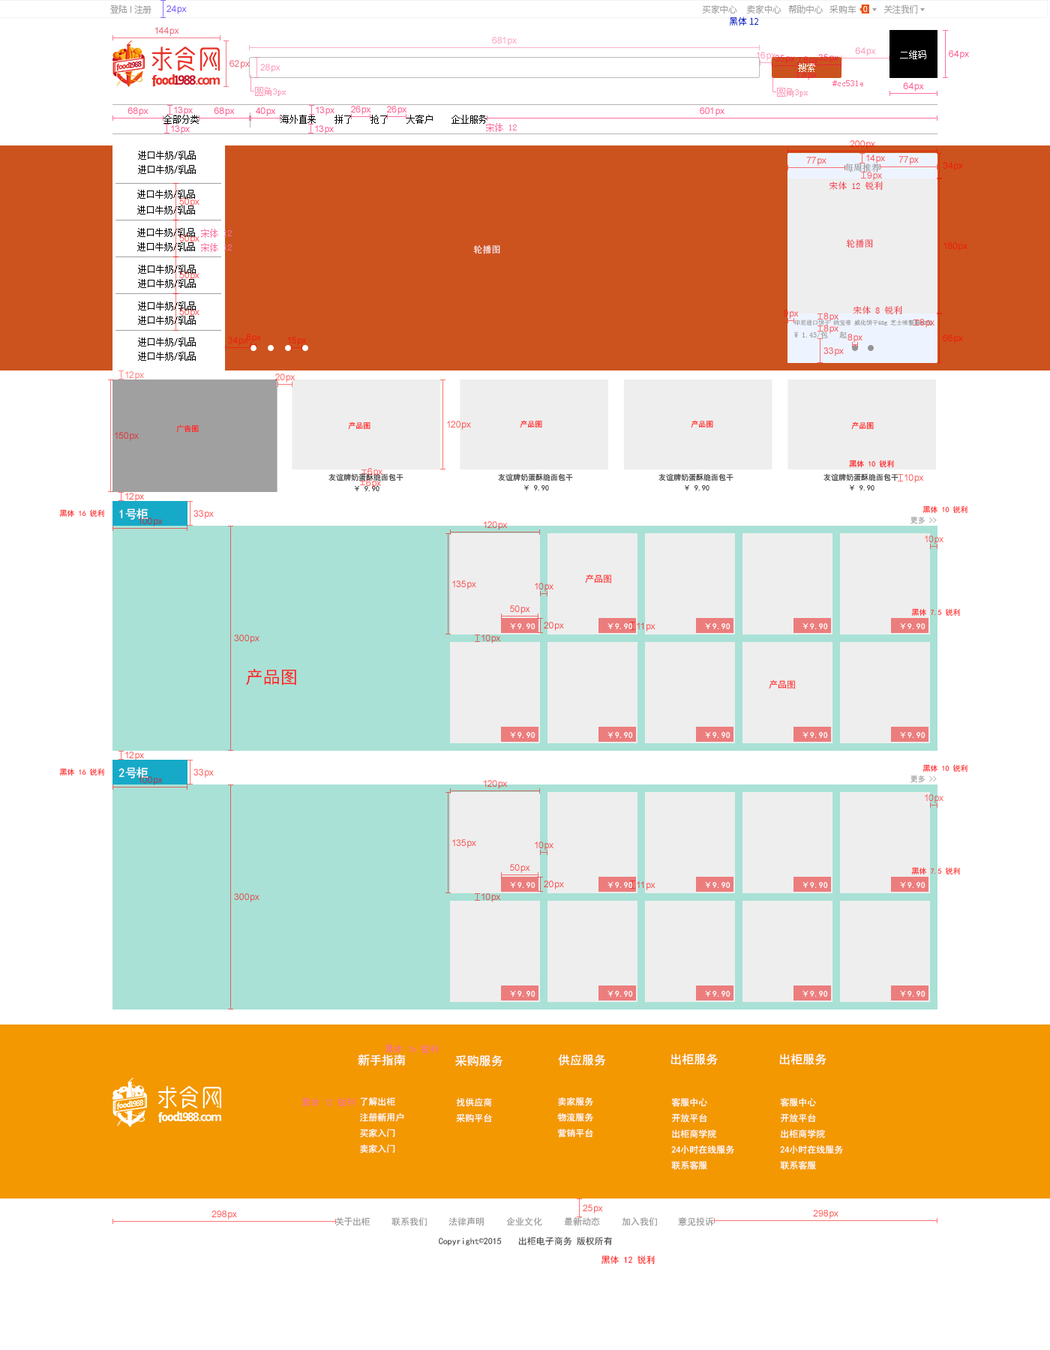
<style>
.page{position:relative;width:1050px;height:1350px;background:#ffffff}
.page>*{position:absolute;margin:0}
.t1{font:9px "SourceHanSansCN-Light";color:#a0a0a0}
.t2{font:7.5px "SourceHanSansCN-Light";color:#fffefe}
.t3{font:9px "SourceHanSansCN-Light";color:#0c22c6}
.t4{font:9px "SimSun";color:#ffffff}
.t5{font:9px "SimSun";color:#fc6f9a}
.t6{font:9px "SimSun";color:#000000}
.t7{font:9px "SimSun";color:#959595}
.t8{font:9px "SimSun";color:#f13341}
.t9{font:9px "SimSun";color:#ffeeef}
.t10{font:9px "SimSun"}
.t11{font:6px "SimSun";color:#a0a0a0}
.t12{font:7.5px "SimSun";color:#a0a0a0}
.t13{font:7.5px "SimHei";color:#fe1d1d}
.t14{font:7.5px "SimHei"}
.t15{font:7.5px "SimHei";color:#363636}
.t16{font:7.5px "SimHei";color:#ff3535}
.t17{font:12px "SimHei";color:#fefefe}
.t18{font:7.5px "SimHei";color:#a0a0a0}
.t19{font:9px "SimHei";color:#ff2222}
.t20{font:8.2px "SimHei";color:#fefefe}
.t21{font:17.4px "SimHei";color:#ff2222}
.t22{font:9px "SimHei";color:#fc6f9a}
.t23{font:12px "SimHei";color:#ffffff}
.t24{font:9px "SimHei";color:#ffffff}
.t25{font:9px "SimHei";color:#959595}
.t26{font:9px "SimHei";color:#434343}
.t27{font:9px "SimSun";color:#434343}
</style>
<div class="page">
<p class="t1" style="left:110px;top:4px;width:22px;height:10px">登陆 I</p>
<p class="t1" style="left:134px;top:5px;width:18px;height:9px">注册</p>
<p class="t1" style="left:702px;top:4px;width:35px;height:10px">买家中心</p>
<p class="t1" style="left:747px;top:4px;width:35px;height:10px">卖家中心</p>
<p class="t1" style="left:788px;top:4px;width:35px;height:10px">帮助中心</p>
<p class="t1" style="left:830px;top:5px;width:26px;height:9px">采购车</p>
<p class="t2" style="left:863px;top:6px;width:5px;height:6px">0</p>
<p class="t1" style="left:884px;top:4px;width:34px;height:10px">关注我们</p>
<p class="t3" style="left:729px;top:16px;width:30px;height:10px">黑体 12</p>
<p class="t4" style="left:900px;top:50px;width:26px;height:9px">二维码</p>
<p class="t4" style="left:798px;top:63px;width:17px;height:9px">搜索</p>
<p class="t5" style="left:832px;top:80px;width:31px;height:6px">#cc531e</p>
<p class="t6" style="left:164px;top:115px;width:35px;height:9px">全部分类</p>
<p class="t6" style="left:280px;top:115px;width:207px;height:9px">海外直来    拼了    抢了    大客户    企业服务</p>
<p class="t5" style="left:486px;top:123px;width:31px;height:9px">宋体 12</p>
<p class="t6" style="left:138px;top:151px;width:58px;height:9px">进口牛奶/乳品</p>
<p class="t6" style="left:138px;top:165px;width:58px;height:9px">进口牛奶/乳品</p>
<p class="t7" style="left:844px;top:164px;width:36px;height:8px">每周推荐</p>
<p class="t8" style="left:829px;top:182px;width:54px;height:8px">宋体 12 锐利</p>
<p class="t6" style="left:137px;top:190px;width:58px;height:9px">进口牛奶/乳品</p>
<p class="t6" style="left:137px;top:206px;width:58px;height:8px">进口牛奶/乳品</p>
<p class="t6" style="left:137px;top:228px;width:58px;height:9px">进口牛奶/乳品</p>
<p class="t5" style="left:201px;top:229px;width:31px;height:9px">宋体 12</p>
<p class="t6" style="left:137px;top:242px;width:58px;height:9px">进口牛奶/乳品</p>
<p class="t5" style="left:201px;top:243px;width:31px;height:9px">宋体 12</p>
<p class="t9" style="left:473px;top:245px;width:27px;height:9px">轮播图</p>
<p class="t10" style="left:846px;top:239px;width:27px;height:9px">轮播图</p>
<p class="t6" style="left:138px;top:265px;width:58px;height:9px">进口牛奶/乳品</p>
<p class="t6" style="left:138px;top:279px;width:58px;height:9px">进口牛奶/乳品</p>
<p class="t6" style="left:138px;top:302px;width:58px;height:8px">进口牛奶/乳品</p>
<p class="t6" style="left:138px;top:316px;width:58px;height:9px">进口牛奶/乳品</p>
<p class="t8" style="left:853px;top:306px;width:49px;height:9px">宋体 8 锐利</p>
<p class="t11" style="left:794px;top:320px;width:138px;height:6px">印尼进口饼干 纳宝帝 威化饼干58g 芝士味整箱60包</p>
<p class="t6" style="left:138px;top:338px;width:58px;height:8px">进口牛奶/乳品</p>
<p class="t12" style="left:794px;top:331px;width:53px;height:8px">¥ 1.45/包   起</p>
<p class="t6" style="left:138px;top:352px;width:58px;height:9px">进口牛奶/乳品</p>
<p class="t13" style="left:176px;top:424px;width:23px;height:9px">广告图</p>
<p class="t14" style="left:348px;top:422px;width:22px;height:8px">产品图</p>
<p class="t14" style="left:520px;top:420px;width:22px;height:8px">产品图</p>
<p class="t14" style="left:691px;top:420px;width:22px;height:8px">产品图</p>
<p class="t14" style="left:851px;top:422px;width:23px;height:8px">产品图</p>
<p class="t13" style="left:849px;top:460px;width:45px;height:8px">黑体 10 锐利</p>
<p class="t15" style="left:328px;top:473px;width:76px;height:9px">友谊牌奶蛋酥脆面包干</p>
<p class="t15" style="left:498px;top:473px;width:75px;height:9px">友谊牌奶蛋酥脆面包干</p>
<p class="t15" style="left:658px;top:473px;width:76px;height:9px">友谊牌奶蛋酥脆面包干</p>
<p class="t15" style="left:824px;top:473px;width:74px;height:9px">友谊牌奶蛋酥脆面包干</p>
<p class="t14" style="left:355px;top:485px;width:25px;height:7px">￥ 9.90</p>
<p class="t14" style="left:524px;top:484px;width:25px;height:7px">￥ 9.90</p>
<p class="t14" style="left:685px;top:484px;width:25px;height:7px">￥ 9.90</p>
<p class="t14" style="left:850px;top:484px;width:24px;height:7px">￥ 9.90</p>
<p class="t16" style="left:59px;top:509px;width:45px;height:9px">黑体 16 锐利</p>
<p class="t17" style="left:119px;top:508px;width:29px;height:12px">1号柜</p>
<p class="t16" style="left:922px;top:506px;width:46px;height:8px">黑体 10 锐利</p>
<p class="t18" style="left:910px;top:517px;width:27px;height:7px">更多 &gt;&gt;</p>
<p class="t19" style="left:585px;top:574px;width:26px;height:10px">产品图</p>
<p class="t16" style="left:911px;top:608px;width:49px;height:8px">黑体 7.5 锐利</p>
<p class="t20" style="left:510px;top:623px;width:26px;height:6px">￥9.90</p>
<p class="t20" style="left:608px;top:623px;width:25px;height:6px">￥9.90</p>
<p class="t20" style="left:705px;top:623px;width:25px;height:6px">￥9.90</p>
<p class="t20" style="left:802px;top:623px;width:26px;height:6px">￥9.90</p>
<p class="t20" style="left:900px;top:623px;width:26px;height:6px">￥9.90</p>
<p class="t21" style="left:246px;top:668px;width:50px;height:18px">产品图</p>
<p class="t19" style="left:769px;top:680px;width:26px;height:9px">产品图</p>
<p class="t20" style="left:510px;top:732px;width:26px;height:6px">￥9.90</p>
<p class="t20" style="left:608px;top:732px;width:25px;height:6px">￥9.90</p>
<p class="t20" style="left:705px;top:732px;width:25px;height:6px">￥9.90</p>
<p class="t20" style="left:802px;top:732px;width:26px;height:6px">￥9.90</p>
<p class="t20" style="left:900px;top:732px;width:26px;height:6px">￥9.90</p>
<p class="t16" style="left:59px;top:768px;width:45px;height:8px">黑体 16 锐利</p>
<p class="t17" style="left:118px;top:766px;width:30px;height:12px">2号柜</p>
<p class="t16" style="left:922px;top:764px;width:46px;height:8px">黑体 10 锐利</p>
<p class="t18" style="left:910px;top:776px;width:27px;height:7px">更多 &gt;&gt;</p>
<p class="t16" style="left:911px;top:867px;width:49px;height:8px">黑体 7.5 锐利</p>
<p class="t20" style="left:510px;top:882px;width:26px;height:6px">￥9.90</p>
<p class="t20" style="left:608px;top:882px;width:25px;height:6px">￥9.90</p>
<p class="t20" style="left:705px;top:882px;width:25px;height:6px">￥9.90</p>
<p class="t20" style="left:802px;top:882px;width:26px;height:6px">￥9.90</p>
<p class="t20" style="left:900px;top:882px;width:26px;height:6px">￥9.90</p>
<p class="t20" style="left:510px;top:991px;width:26px;height:6px">￥9.90</p>
<p class="t20" style="left:608px;top:991px;width:25px;height:6px">￥9.90</p>
<p class="t20" style="left:705px;top:991px;width:25px;height:6px">￥9.90</p>
<p class="t20" style="left:802px;top:991px;width:26px;height:6px">￥9.90</p>
<p class="t20" style="left:900px;top:991px;width:26px;height:6px">￥9.90</p>
<p class="t22" style="left:386px;top:1045px;width:52px;height:8px">黑体 16 锐利</p>
<p class="t23" style="left:358px;top:1054px;width:48px;height:12px">新手指南</p>
<p class="t23" style="left:455px;top:1054px;width:47px;height:12px">采购服务</p>
<p class="t23" style="left:558px;top:1054px;width:48px;height:12px">供应服务</p>
<p class="t23" style="left:670px;top:1053px;width:48px;height:12px">出柜服务</p>
<p class="t23" style="left:779px;top:1053px;width:47px;height:12px">出柜服务</p>
<p class="t24" style="left:359px;top:1097px;width:45px;height:57px">了解出柜<br>注册新用户<br>买家入门<br>卖家入门</p>
<p class="t24" style="left:557px;top:1097px;width:36px;height:41px">卖家服务<br>物流服务<br>营销平台</p>
<p class="t22" style="left:302px;top:1098px;width:53px;height:8px">黑体 12 锐利</p>
<p class="t24" style="left:456px;top:1098px;width:36px;height:25px">找供应商<br>采购平台</p>
<p class="t24" style="left:671px;top:1098px;width:63px;height:72px">客服中心<br>开放平台<br>出柜商学院<br>24小时在线服务<br>联系客服</p>
<p class="t24" style="left:780px;top:1098px;width:63px;height:72px">客服中心<br>开放平台<br>出柜商学院<br>24小时在线服务<br>联系客服</p>
<p class="t25" style="left:335px;top:1217px;width:35px;height:9px">关于出柜</p>
<p class="t25" style="left:392px;top:1217px;width:35px;height:9px">联系我们</p>
<p class="t25" style="left:448px;top:1217px;width:36px;height:9px">法律声明</p>
<p class="t25" style="left:506px;top:1217px;width:36px;height:9px">企业文化</p>
<p class="t25" style="left:564px;top:1217px;width:36px;height:9px">最新动态</p>
<p class="t25" style="left:622px;top:1217px;width:35px;height:9px">加入我们</p>
<p class="t25" style="left:678px;top:1217px;width:36px;height:9px">意见投诉</p>
<p class="t26" style="left:439px;top:1238px;width:63px;height:8px">Copyright<span class="t27">©</span>2015</p>
<p class="t26" style="left:518px;top:1237px;width:54px;height:9px">出柜电子商务</p>
<p class="t26" style="left:577px;top:1237px;width:35px;height:9px">版权所有</p>
<p class="t19" style="left:601px;top:1256px;width:54px;height:8px">黑体 12 锐利</p>
</div>
